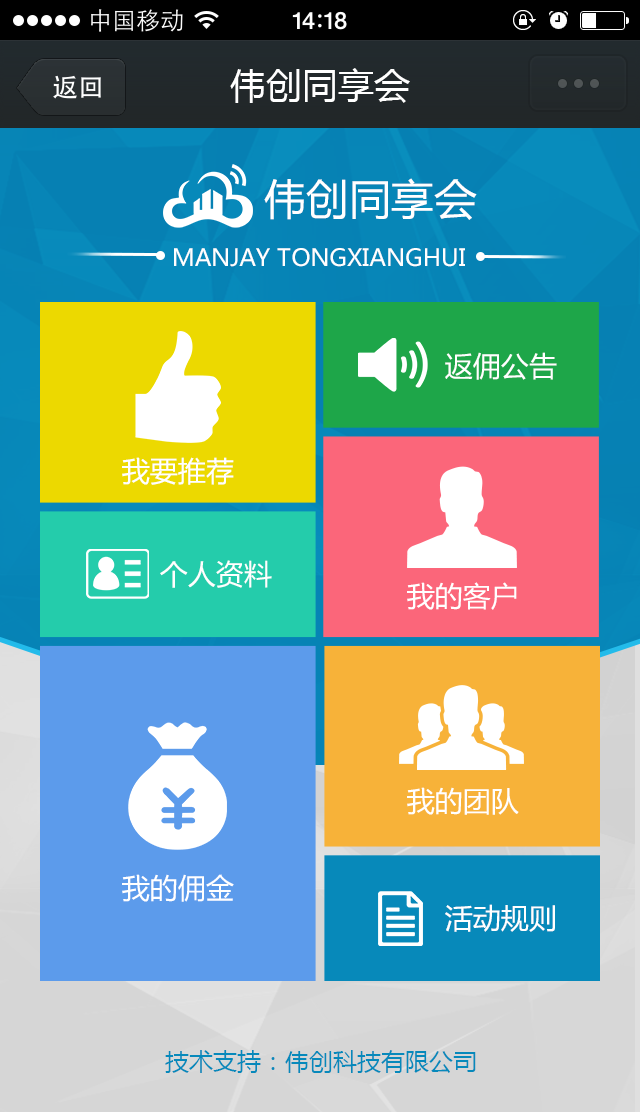
<style>
.page{position:relative;width:640px;height:1112px}
.page>*{position:absolute;margin:0}
.t1{font:36px "MicrosoftYaHei";color:#ffffff}
.t2{font:42.3px "MicrosoftYaHei";color:#ffffff}
.t3{font:23.5px "MicrosoftYaHei";color:#ffffff}
.t4{font:28px "MicrosoftYaHei";color:#ffffff}
.t5{font:24px "MicrosoftYaHei";color:#0789bb}
</style>
<div class="page">
<p class="t1" style="left:230px;top:68px;width:180px;height:35px">伟创同享会</p>
<p class="t2" style="left:264px;top:178px;width:213px;height:42px">伟创同享会</p>
<p class="t3" style="left:174px;top:248px;width:291px;height:19px">MANJAY TONGXIANGHUI</p>
<p class="t4" style="left:445px;top:352px;width:112px;height:28px">返佣公告</p>
<p class="t4" style="left:122px;top:457px;width:112px;height:28px">我要推荐</p>
<p class="t4" style="left:160px;top:560px;width:112px;height:28px">个人资料</p>
<p class="t4" style="left:407px;top:582px;width:110px;height:28px">我的客户</p>
<p class="t4" style="left:407px;top:787px;width:112px;height:28px">我的团队</p>
<p class="t4" style="left:122px;top:874px;width:112px;height:28px">我的佣金</p>
<p class="t4" style="left:445px;top:904px;width:110px;height:28px">活动规则</p>
<p class="t5" style="left:165px;top:1050px;width:311px;height:23px">技术支持：伟创科技有限公司</p>
</div>
